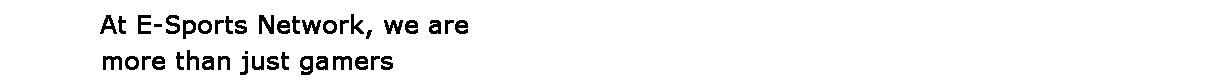
<style>
.page{position:relative;width:1225px;height:80px;background:#ffffff}
.page>*{position:absolute;margin:0}
.t1{font:24px/36px "Verdana";color:#000000;font-weight:bold}
</style>
<div class="page">
<p class="t1" style="left:100px;top:14px;width:368px;height:61px">At E-Sports Network, we are more than just gamers</p>
</div>
